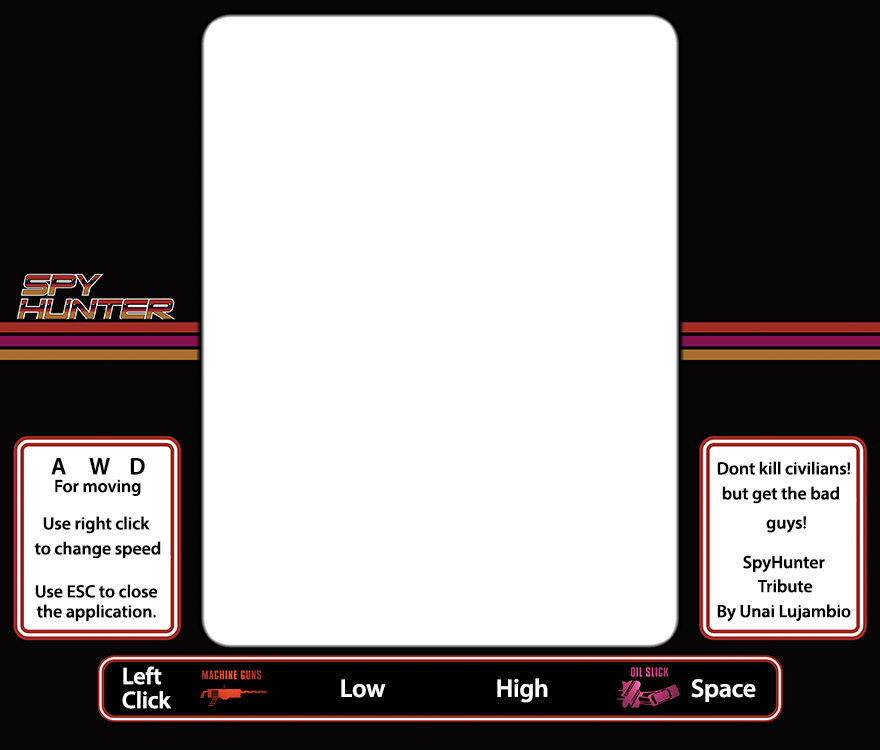
<style>
.page{position:relative;width:880px;height:750px;background:#ffffff}
.page>*{position:absolute;margin:0}
.t1{font:24px "MyriadPro-Semibold";letter-spacing:-0.007em;color:#000000}
.t2{font:18px "MyriadPro-Semibold";letter-spacing:-0.007em;color:#000000}
.t3{font:18px/29.2px "MyriadPro-Semibold";letter-spacing:-0.007em;color:#000000}
.t4{font:25.7px/51.4px "MyriadPro-Semibold";letter-spacing:-0.007em;color:#ffffff}
.t5{font:24px/51.4px "MyriadPro-Semibold";letter-spacing:-0.007em;color:#ffffff}
.t6{font:25.7px "MyriadPro-Semibold";letter-spacing:-0.007em;color:#ffffff}
.t7{font:24px "MyriadPro-Semibold";letter-spacing:-0.007em;color:#ffffff}
</style>
<div class="page">
<p class="t1" style="left:51px;top:458px;width:94px;height:17px">A     W    D</p>
<p class="t2" style="left:717px;top:461px;width:134px;height:14px">Dont kill civilians!</p>
<p class="t2" style="left:55px;top:479px;width:86px;height:17px">For moving</p>
<p class="t3" style="left:722px;top:486px;width:118px;height:47px">but get the bad <br>guys!</p>
<p class="t2" style="left:43px;top:516px;width:107px;height:18px">Use right click</p>
<p class="t2" style="left:34px;top:541px;width:127px;height:18px">to change speed</p>
<p class="t2" style="left:743px;top:555px;width:82px;height:18px">SpyHunter</p>
<p class="t2" style="left:757px;top:579px;width:56px;height:14px">Tribute</p>
<p class="t2" style="left:35px;top:584px;width:123px;height:14px">Use ESC to close</p>
<p class="t2" style="left:36px;top:604px;width:120px;height:18px">the application.</p>
<p class="t2" style="left:717px;top:604px;width:134px;height:18px">By Unai Lujambio</p>
<p class="t4" style="left:123px;top:666px;width:39px;height:19px"><span class="t5">Left<br></span><br>Click</p>
<p class="t6" style="left:497px;top:678px;width:51px;height:25px">High</p>
<p class="t6" style="left:341px;top:679px;width:45px;height:19px">Low</p>
<p class="t6" style="left:691px;top:679px;width:65px;height:23px">Space</p>
<p class="t7" style="left:122px;top:691px;width:49px;height:18px">Click</p>
</div>
